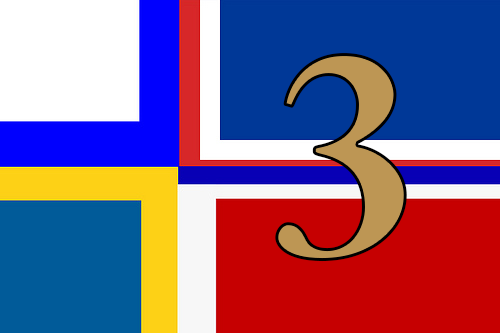
<style>
.page{position:relative;width:500px;height:333px}
.page>*{position:absolute;margin:0}
.t1{font:300px "ACaslonPro-Bold";color:#bd9654}
</style>
<div class="page">
<p class="t1" style="left:275px;top:53px;width:132px;height:209px">3</p>
</div>
